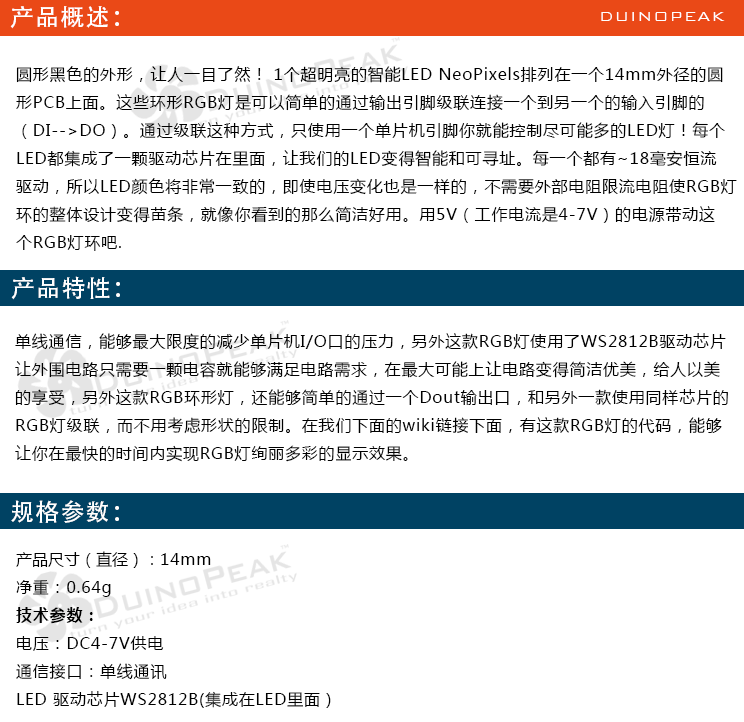
<style>
.page{position:relative;width:744px;height:722px;background:#ffffff}
.page>*{position:absolute;margin:0}
.t1{font:24px "AdobeHeitiStd-Regular";letter-spacing:0.05em;color:#ffffff}
.t2{font:18px "BankGothicBT-Light";letter-spacing:0.05em;color:#ffffff}
.t3{font:16px "MicrosoftYaHei";letter-spacing:0.05em;color:#000000}
.t4{font:16px "MicrosoftYaHei";color:#000000}
.t5{font:16px "MicrosoftYaHei-Bold";letter-spacing:0.05em;color:#000000}
</style>
<div class="page">
<p class="t1" style="left:10px;top:6px;width:109px;height:23px">产品概述：</p>
<p class="t2" style="left:601px;top:12px;width:124px;height:9px">DUINOPEAK</p>
<p class="t3" style="left:16px;top:66px;width:721px;height:185px">圆形黑色的外形，让人一目了然！ 1个超明亮的智能LED NeoPixels排列在一个14mm外径的圆<br>形PCB上面。这些环形RGB灯是可以简单的通过输出引脚级联连接一个到另一个的输入引脚的<br>（DI--&gt;DO）。通过级联这种方式，只使用一个单片机引脚你就能控制尽可能多的LED灯！每个<br>LED都集成了一颗驱动芯片在里面，让我们的LED变得智能和可寻址。每一个都有~18毫安恒流<br>驱动，所以LED颜色将非常一致的，即使电压变化也是一样的，不需要外部电阻限流电阻使RGB灯<br>环的整体设计变得苗条，就像你看到的那么简洁好用。用5V（工作电流是4-7V）的电源带动这<br>个RGB灯环吧.</p>
<p class="t1" style="left:11px;top:276px;width:109px;height:24px">产品特性：</p>
<p class="t3" style="left:15px;top:333px;width:713px;height:129px">单线通信，能够最大限度的减少单片机I/O口的压力，另外这款RGB灯使用了WS2812B驱动芯片<br>让外围电路只需要一颗电容就能够满足电路需求，在最大可能上让电路变得简洁优美，给人以美<br>的享受，另外这款RGB环形灯，还能够简单的通过一个Dout输出口，和另外一款使用同样芯片的<br>RGB灯级联，而不用考虑形状的限制。在我们下面的wiki链接下面，有这款RGB灯的代码，能够<br>让你在最快的时间内实现RGB灯绚丽多彩的显示效果。</p>
<p class="t1" style="left:11px;top:500px;width:108px;height:23px">规格参数：</p>
<p class="t3" style="left:16px;top:551px;width:315px;height:157px"><span class="t4">产品尺寸（直径）：</span>14mm<br>净重：0.64g<br><span class="t5">技术参数：<br></span>电压：DC4-7V供电<br>通信接口：单线通讯<br>LED 驱动芯片WS2812B(集成在LED里面）</p>
</div>
